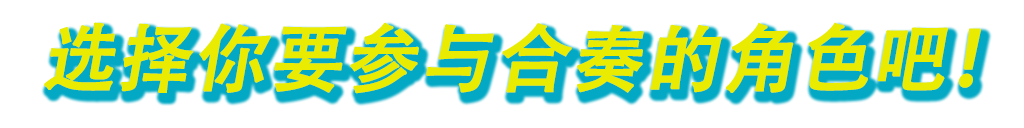
<style>
.page{position:relative;width:1024px;height:128px;background:#ffffff}
.page>*{position:absolute;margin:0}
.t1{font:73.3px "AdobeHeitiStd-Regular";color:#e9ec00;font-weight:bold;font-style:italic}
</style>
<div class="page">
<p class="t1" style="left:44px;top:22px;width:937px;height:72px">选择你要参与合奏的角色吧！</p>
</div>
